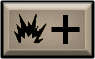
<style>
.page{position:relative;width:95px;height:59px}
.page>*{position:absolute;margin:0}
.t1{font:60px "ArialMT";color:#000000}
</style>
<div class="page">
<p class="t1" style="left:51px;top:15px;width:29px;height:29px">+</p>
</div>
